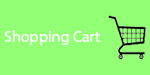
<style>
.page{position:relative;width:150px;height:75px;background:#93ff75}
.page>*{position:absolute;margin:0}
.t1{font:16px "MyriadPro-Regular";color:#ffffff}
</style>
<div class="page">
<p class="t1" style="left:4px;top:30px;width:96px;height:15px">Shopping Cart</p>
</div>
